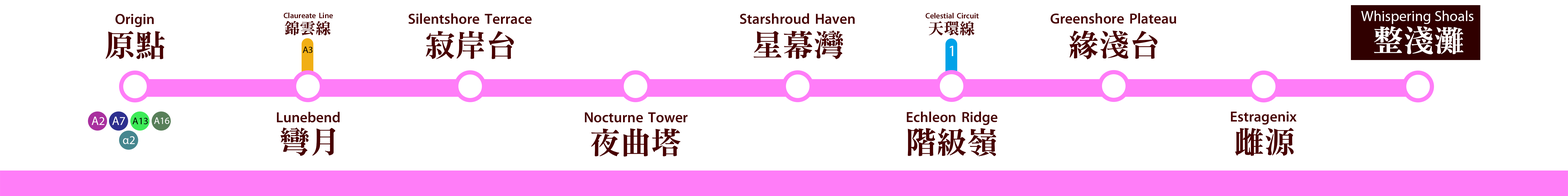
<style>
.page{position:relative;width:1568px;height:196px;background:#ffffff}
.page>*{position:absolute;margin:0}
.t1{font:14.7px "MTR-Sung";color:#480000}
.t2{font:7.8px "MTR-Sung";color:#480000}
.t3{font:14.7px "MyriadPro-Regular";color:#ffffff}
.t4{font:15.7px "MTR-Sung";color:#480000}
.t5{font:30.6px "MTR-Sung";color:#ffffff}
.t6{font:30.6px "MTR-Sung";color:#480000}
.t7{font:9.4px "MyriadPro-Regular";color:#000000}
.t8{font:15.7px "MyriadPro-Regular";color:#ffffff}
.t9{font:12px "MyriadPro-Regular";color:#ffffff}
.t10{font:9.8px "MyriadPro-Regular";color:#000000}
.t11{font:9.7px "MyriadPro-Regular";color:#ffffff}
</style>
<div class="page">
<p class="t1" style="left:115px;top:14px;width:39px;height:13px">Origin</p>
<p class="t2" style="left:284px;top:12px;width:49px;height:6px">Claureate Line</p>
<p class="t1" style="left:408px;top:13px;width:124px;height:11px">Silentshore Terrace</p>
<p class="t1" style="left:740px;top:13px;width:115px;height:11px">Starshroud Haven</p>
<p class="t2" style="left:926px;top:13px;width:53px;height:6px">Celestial Circuit</p>
<p class="t1" style="left:1051px;top:13px;width:125px;height:11px">Greenshore Plateau</p>
<p class="t3" style="left:1361px;top:11px;width:112px;height:13px">Whispering Shoals</p>
<p class="t4" style="left:285px;top:21px;width:46px;height:15px">錦雲線</p>
<p class="t4" style="left:929px;top:21px;width:46px;height:15px">天環線</p>
<p class="t5" style="left:1374px;top:26px;width:90px;height:28px">整淺灘</p>
<p class="t6" style="left:105px;top:31px;width:60px;height:28px">原點</p>
<p class="t6" style="left:426px;top:31px;width:88px;height:28px">寂岸台</p>
<p class="t6" style="left:753px;top:30px;width:90px;height:29px">星幕灣</p>
<p class="t6" style="left:1069px;top:30px;width:89px;height:29px">緣淺台</p>
<p class="t7" style="left:303px;top:47px;width:9px;height:6px">A3</p>
<p class="t8" style="left:950px;top:46px;width:3px;height:10px">1</p>
<p class="t1" style="left:277px;top:112px;width:63px;height:10px">Lunebend</p>
<p class="t1" style="left:585px;top:112px;width:103px;height:10px">Nocturne Tower</p>
<p class="t1" style="left:907px;top:111px;width:90px;height:14px">Echleon Ridge</p>
<p class="t1" style="left:1231px;top:111px;width:66px;height:14px">Estragenix</p>
<p class="t9" style="left:92px;top:117px;width:12px;height:8px">A2</p>
<p class="t9" style="left:112px;top:117px;width:13px;height:8px">A7</p>
<p class="t10" style="left:133px;top:118px;width:15px;height:6px">A13</p>
<p class="t11" style="left:154px;top:117px;width:15px;height:7px">A16</p>
<p class="t9" style="left:123px;top:136px;width:12px;height:8px">α2</p>
<p class="t6" style="left:280px;top:127px;width:55px;height:29px">彎月</p>
<p class="t6" style="left:591px;top:128px;width:90px;height:29px">夜曲塔</p>
<p class="t6" style="left:908px;top:128px;width:88px;height:28px">階級嶺</p>
<p class="t6" style="left:1235px;top:128px;width:59px;height:28px">雌源</p>
</div>
